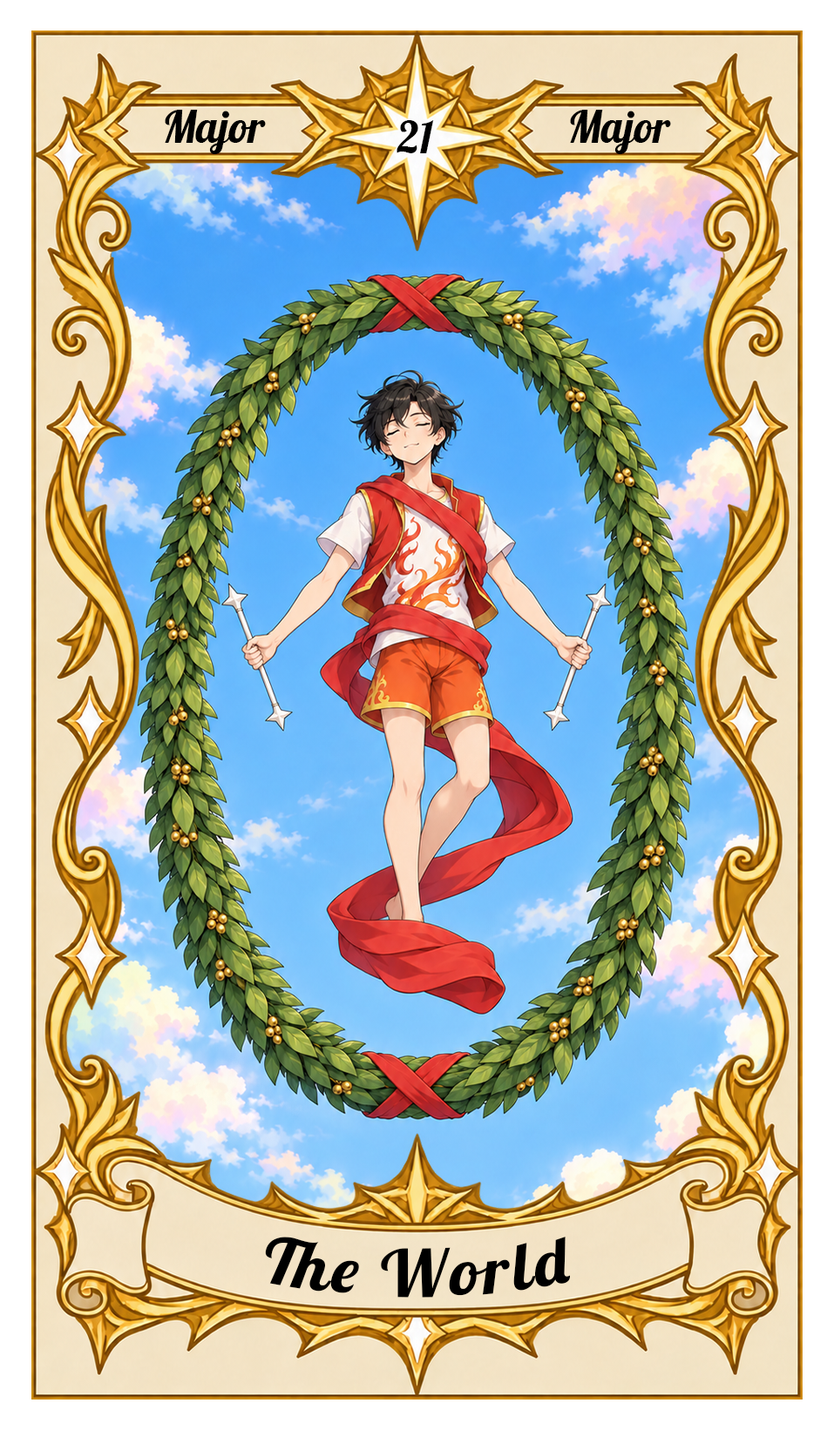
<style>
.page{position:relative;width:834px;height:1430px}
.page>*{position:absolute;margin:0}
.t1{font:43.6px "Lobster-Regular";color:#000000}
.t2{font:65.3px "Lobster-Regular";letter-spacing:0.05em;color:#000000}
</style>
<div class="page">
<p class="t1" style="left:165px;top:110px;width:101px;height:44px">Major</p>
<p class="t1" style="left:570px;top:110px;width:101px;height:44px">Major</p>
<p class="t1" style="left:396px;top:120px;width:38px;height:33px">21</p>
<p class="t2" style="left:265px;top:1237px;width:306px;height:61px">The World</p>
</div>
